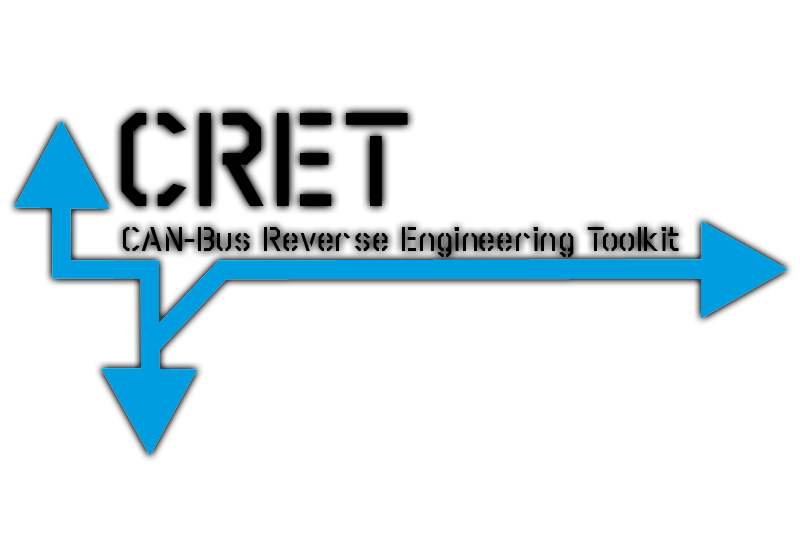
<style>
.page{position:relative;width:800px;height:535px;background:#ffffff}
.page>*{position:absolute;margin:0}
.t1{font:133.3px "Scriber-BoldStencil";color:#000000}
.t2{font:34.7px "Scriber-BoldStencil";color:#000000}
</style>
<div class="page">
<p class="t1" style="left:121px;top:113px;width:287px;height:93px">CRET</p>
<p class="t2" style="left:123px;top:227px;width:556px;height:30px">CAN-Bus Reverse Engineering Toolkit</p>
</div>
